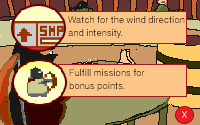
<style>
.page{position:relative;width:200px;height:125px;background:#fdc689}
.page>*{position:absolute;margin:0}
.t1{font:11px/13px "OriyaSangamMN"}
.t2{font:11px "OriyaSangamMN";color:#ffffff}
</style>
<div class="page">
<p class="t1" style="left:68px;top:16px;width:117px;height:23px">Watch for the wind direction and intensity.</p>
<p class="t1" style="left:69px;top:69px;width:76px;height:22px">Fulfill missions for<br>bonus points.</p>
<p class="t2" style="left:182px;top:111px;width:5px;height:7px">X</p>
</div>
